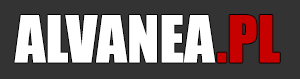
<style>
.page{position:relative;width:300px;height:79px;background:#333333}
.page>*{position:absolute;margin:0}
.t1{font:60px "Impact";color:#ffffff}
.t2{font:60px "Impact";color:#c70000}
</style>
<div class="page">
<p class="t1" style="left:14px;top:15px;width:266px;height:48px">ALVANEA<span class="t2">.PL</span></p>
</div>
